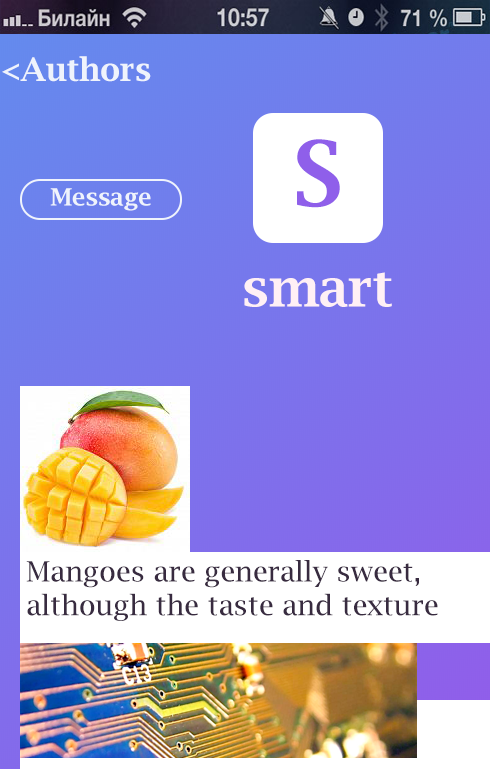
<style>
.page{position:relative;width:490px;height:769px}
.page>*{position:absolute;margin:0}
.t1{font:32px "LucidaBright-Demi";color:#eff3fc}
.t2{font:90px "LucidaBright-Demi";color:#8f5fea}
.t3{font:24px "LucidaBright-Demi";color:#eff3fc}
.t4{font:52px "LucidaBright-Demi";color:#fff0f5}
.t5{font:28px "LucidaBright";color:#382b40}
</style>
<div class="page">
<p class="t1" style="left:2px;top:56px;width:149px;height:26px">&lt;Authors</p>
<p class="t2" style="left:297px;top:139px;width:43px;height:69px">S</p>
<p class="t3" style="left:50px;top:188px;width:101px;height:23px">Message</p>
<p class="t4" style="left:244px;top:272px;width:148px;height:35px">smart</p>
<p class="t5" style="left:26px;top:560px;width:412px;height:61px">Mangoes are generally sweet, <br>although the taste and texture</p>
</div>
